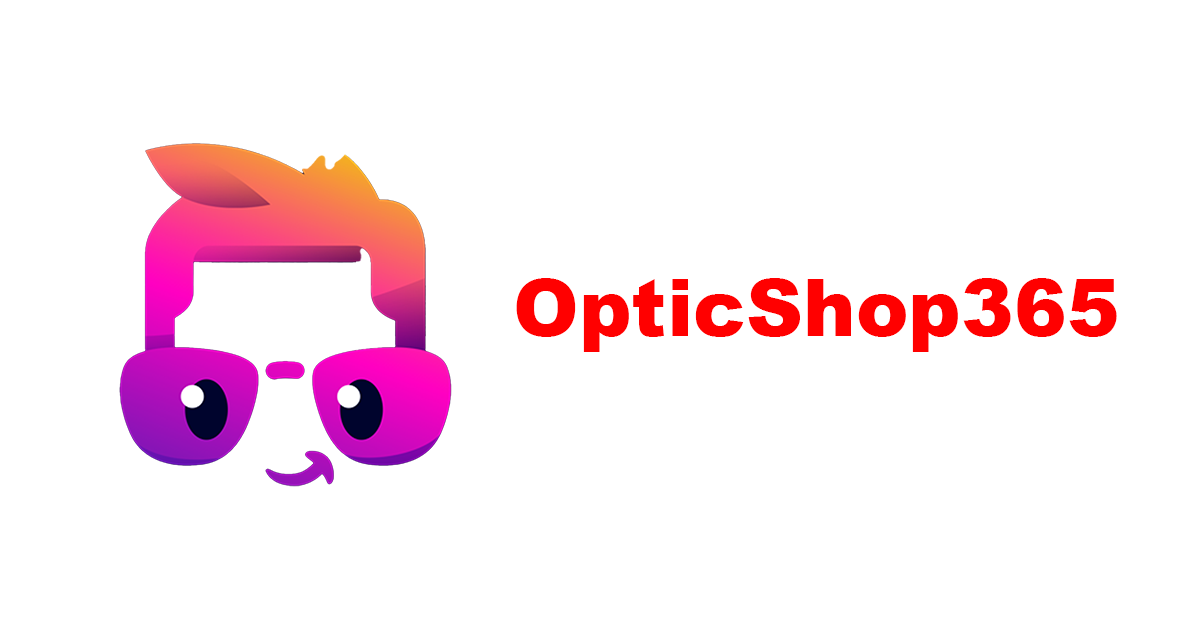
<style>
.page{position:relative;width:1200px;height:630px;background:#ffffff}
.page>*{position:absolute;margin:0}
.t1{font:79.2px "Arial-Black";color:#ff0000}
</style>
<div class="page">
<p class="t1" style="left:516px;top:278px;width:601px;height:74px">OpticShop365</p>
</div>
